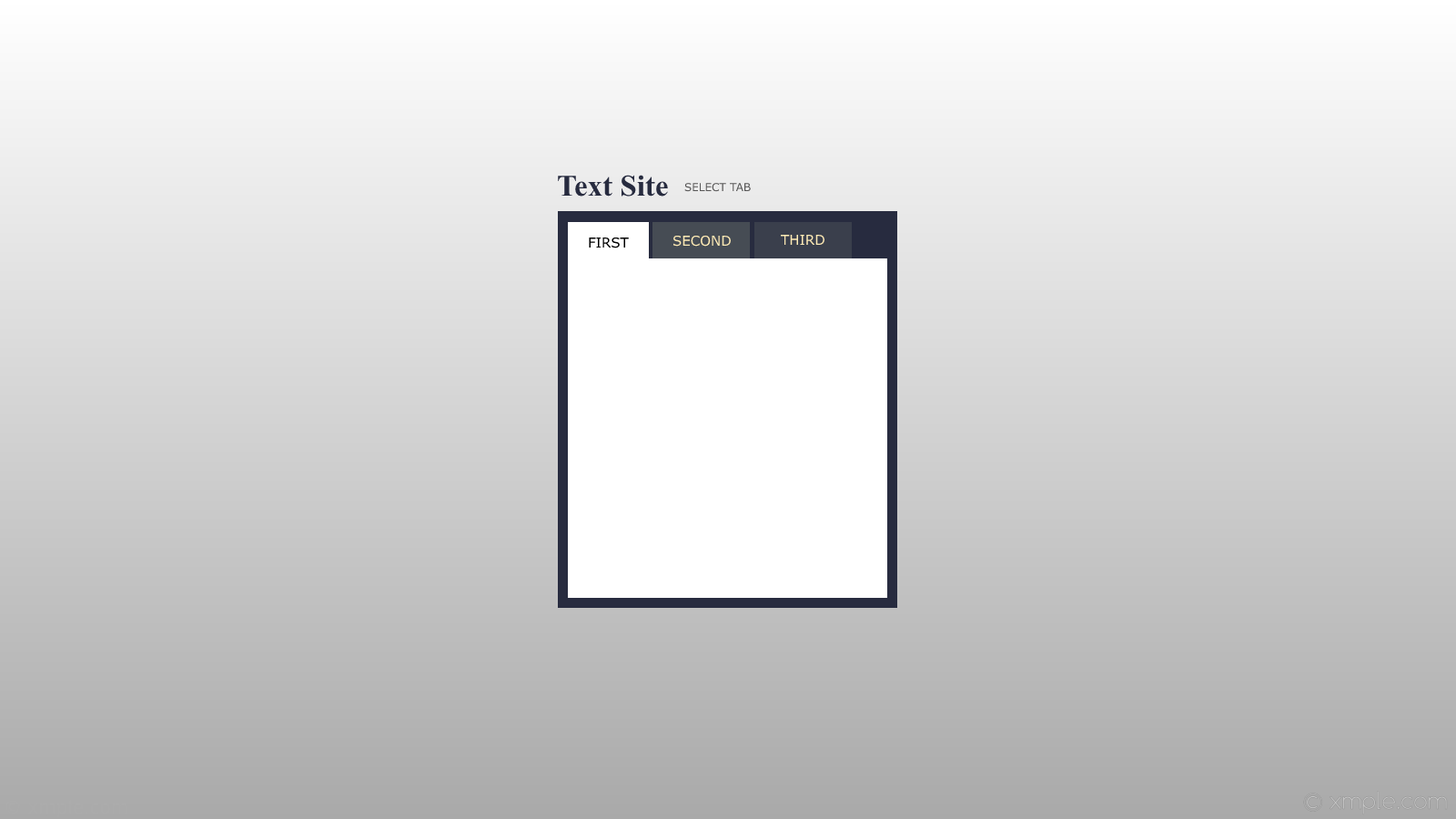
<style>
.page{position:relative;width:1456px;height:819px}
.page>*{position:absolute;margin:0}
.t1{font:30px "TimesNewRomanPS-BoldMT";color:#272b3f}
.t2{font:10.9px "Verdana";color:#575656}
.t3{font:13.6px "Verdana";color:#000000}
.t4{font:13.6px "Verdana";color:#ffebb5}
</style>
<div class="page">
<p class="t1" style="left:558px;top:175px;width:110px;height:22px">Text Site</p>
<p class="t2" style="left:684px;top:183px;width:67px;height:9px">SELECT TAB</p>
<p class="t3" style="left:589px;top:237px;width:40px;height:11px">FIRST</p>
<p class="t4" style="left:672px;top:235px;width:59px;height:12px">SECOND</p>
<p class="t4" style="left:781px;top:235px;width:43px;height:10px">THIRD</p>
</div>
